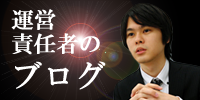
<style>
.page{position:relative;width:200px;height:100px}
.page>*{position:absolute;margin:0}
.t1{font:22px/28px "HGMinchoB";color:#ffffff;font-weight:bold}
.t2{font:22px/24px "HGMinchoB";color:#ffffff;font-weight:bold}
.t3{font:31px/28px "HGMinchoB";color:#ffffff;font-weight:bold}
</style>
<div class="page">
<p class="t1" style="left:11px;top:9px;width:95px;height:81px"><span class="t2">運営<br></span>責任者の<br><span class="t3">ブログ</span></p>
</div>
